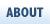
<style>
.page{position:relative;width:50px;height:24px}
.page>*{position:absolute;margin:0}
.t1{font:14px "Humanist521BT-BoldCondensed";color:#2d5078}
</style>
<div class="page">
<p class="t1" style="left:6px;top:7px;width:38px;height:10px">ABOUT</p>
</div>
